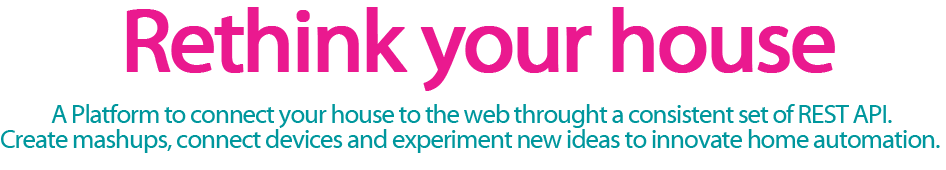
<style>
.page{position:relative;width:946px;height:170px;background:#ffffff}
.page>*{position:absolute;margin:0}
.t1{font:90px "MyriadWebPro";letter-spacing:-0.05em;color:#ea198f;font-weight:bold}
.t2{font:26px "MyriadWebPro";letter-spacing:-0.04em;color:#00979d}
.t3{font:26.1px "MyriadWebPro";letter-spacing:-0.04em;color:#00979d}
</style>
<div class="page">
<p class="t1" style="left:126px;top:7px;width:709px;height:84px">Rethink your house</p>
<p class="t2" style="left:51px;top:104px;width:841px;height:24px">A Platform to connect your house to the web throught a consistent set of REST API.</p>
<p class="t3" style="left:1px;top:129px;width:939px;height:24px">Create mashups, connect devices and experiment new ideas to innovate home automation.</p>
</div>
